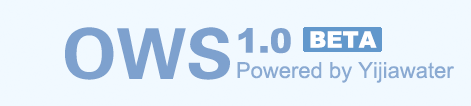
<style>
.page{position:relative;width:471px;height:106px;background:#f1f9ff}
.page>*{position:absolute;margin:0}
.t1{font:70px "DHT";color:#7ea1ce}
.t2{font:33.7px "Arial-Black";color:#7ea1ce}
.t3{font:22.4px "Arial-Black";color:#ffffff}
.t4{font:22px "ArialMT";color:#8aaad2}
</style>
<div class="page">
<p class="t1" style="left:65px;top:27px;width:165px;height:53px">OWS</p>
<p class="t2" style="left:238px;top:28px;width:53px;height:26px">1.0</p>
<p class="t3" style="left:310px;top:31px;width:67px;height:17px">BETA</p>
<p class="t4" style="left:237px;top:62px;width:217px;height:21px">Powered by Yijiawater</p>
</div>
